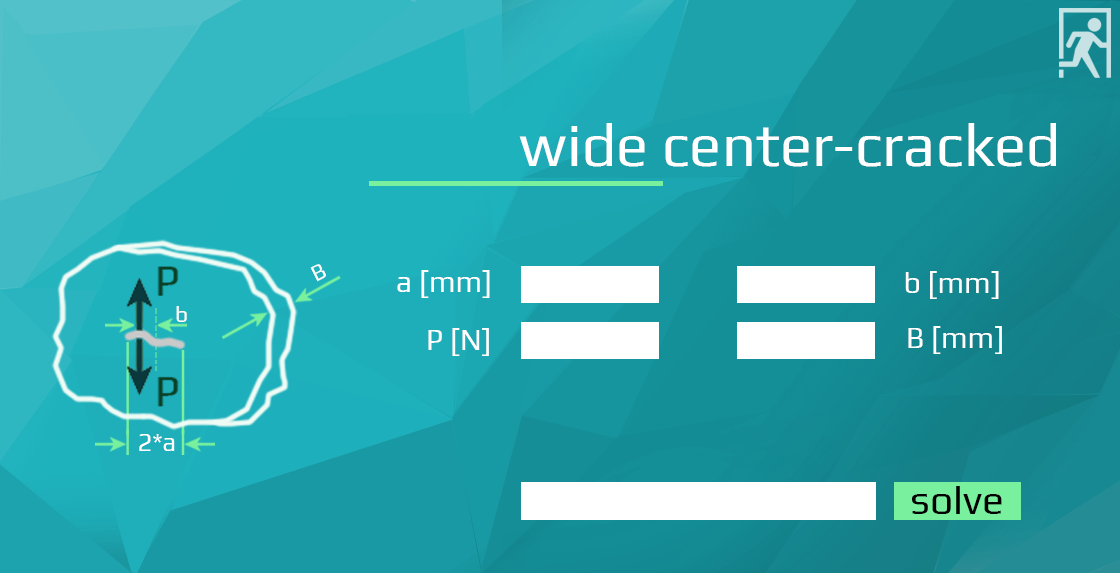
<style>
.page{position:relative;width:1120px;height:573px}
.page>*{position:absolute;margin:0}
.t1{font:60.3px "Play-Regular";color:#ffffff}
.t2{font:23px "Play-Regular";color:#ffffff}
.t3{font:29.7px "Play-Regular";color:#ffffff}
.t4{font:27px "Play-Regular";color:#ffffff;scale:0.94 1}
</style>
<div class="page">
<p class="t1" style="left:519px;top:123px;width:537px;height:44px">wide center-cracked</p>
<p class="t2" style="left:310px;top:264px;width:16px;height:18px;rotate:-27deg">B</p>
<p class="t3" style="left:397px;top:270px;width:93px;height:28px">a [mm]</p>
<p class="t3" style="left:905px;top:271px;width:94px;height:28px">b [mm]</p>
<p class="t2" style="left:176px;top:306px;width:11px;height:16px">b</p>
<p class="t3" style="left:428px;top:328px;width:61px;height:28px">P [N]</p>
<p class="t3" style="left:908px;top:326px;width:94px;height:28px">B [mm]</p>
<p class="t4" style="left:139px;top:434px;width:36px;height:17px">2*a</p>
</div>
